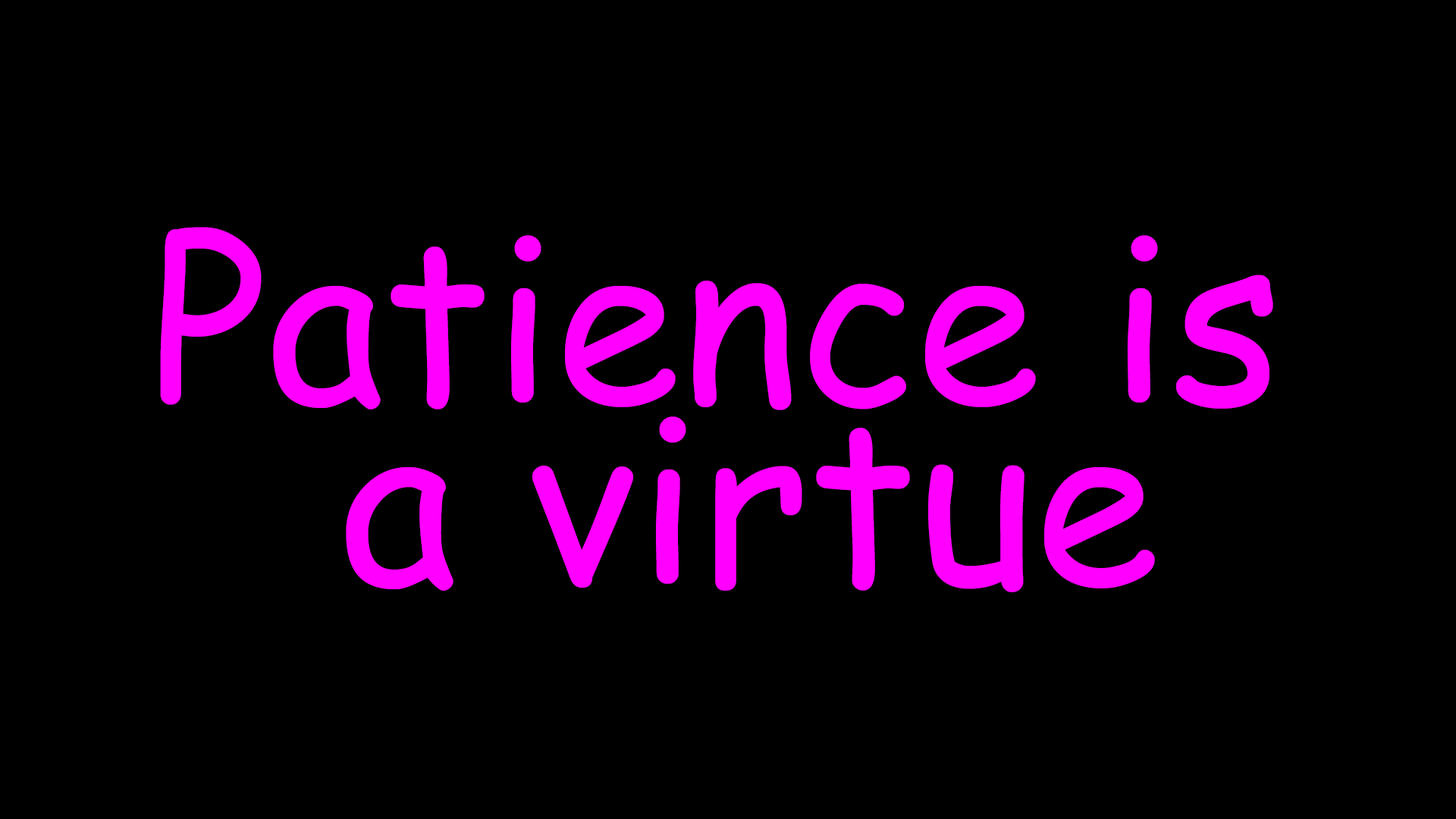
<style>
.page{position:relative;width:1456px;height:819px;background:#000000}
.page>*{position:absolute;margin:0}
.t1{font:227.5px/19px "ComicSansMS";color:#ff00ff}
</style>
<div class="page">
<p class="t1" style="left:160px;top:227px;width:1113px;height:365px;text-align:center">Patience is <br><br><br><br><br><br>a virtue</p>
</div>
